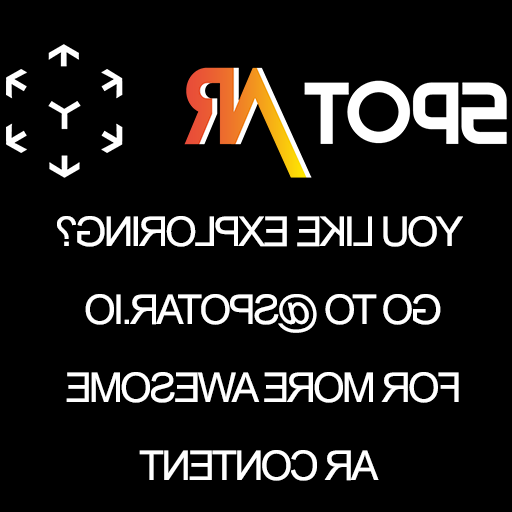
<style>
.page{position:relative;width:512px;height:512px;background:#000000}
.page>*{position:absolute;margin:0}
.t1{font:41px/78px "ArialMT";letter-spacing:-0.074em;color:#ffffff}
</style>
<div class="page">
<p class="t1" style="left:57px;top:216px;width:406px;height:265px;text-align:center;rotate:180deg">YOU LIKE EXPLORING?<br>GO TO @SPOTAR.IO <br>FOR MORE AWESOME <br>AR CONTENT</p>
</div>
